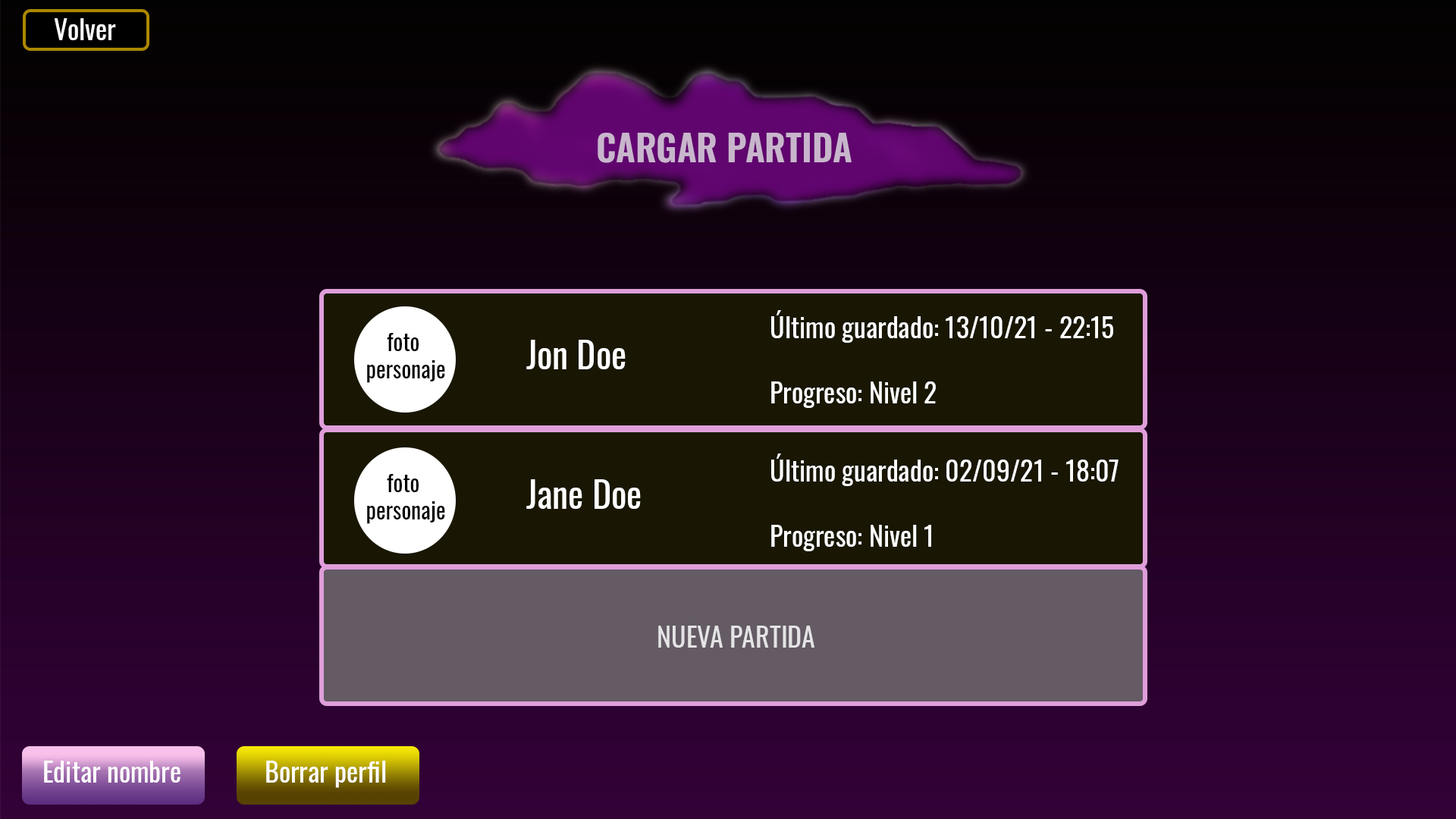
<style>
.page{position:relative;width:1456px;height:819px}
.page>*{position:absolute;margin:0}
.t1{font:27.3px "Oswald-Regular";color:#ffffff}
.t2{font:36.4px "Oswald-SemiBold";color:#c8b6cc}
.t3{font:22.7px "Oswald-Regular";color:#010101}
.t4{font:36.4px "Oswald-Regular";color:#ffffff}
.t5{font:27.3px "Oswald-Regular";color:#e5e4e5}
</style>
<div class="page">
<p class="t1" style="left:54px;top:18px;width:62px;height:22px">Volver</p>
<p class="t2" style="left:598px;top:133px;width:254px;height:30px">CARGAR PARTIDA</p>
<p class="t1" style="left:771px;top:310px;width:342px;height:98px">Último guardado: 13/10/21 - 22:15<br><br>Progreso: Nivel 2</p>
<p class="t3" style="left:367px;top:333px;width:78px;height:50px;text-align:center">foto <br>personaje</p>
<p class="t4" style="left:526px;top:340px;width:100px;height:29px">Jon Doe</p>
<p class="t1" style="left:771px;top:453px;width:348px;height:98px">Último guardado: 02/09/21 - 18:07<br><br>Progreso: Nivel 1</p>
<p class="t3" style="left:367px;top:474px;width:78px;height:50px;text-align:center">foto <br>personaje</p>
<p class="t4" style="left:526px;top:479px;width:115px;height:30px">Jane Doe</p>
<p class="t5" style="left:658px;top:626px;width:156px;height:22px">NUEVA PARTIDA</p>
<p class="t1" style="left:44px;top:761px;width:136px;height:22px">Editar nombre</p>
<p class="t1" style="left:266px;top:761px;width:120px;height:27px">Borrar perfil</p>
</div>
